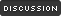
<style>
.page{position:relative;width:69px;height:16px;background:#363636}
.page>*{position:absolute;margin:0}
.t1{font:8.7px "Silkscreen";color:#ffffff}
</style>
<div class="page">
<p class="t1" style="left:4px;top:6px;width:53px;height:5px">discussion</p>
</div>
